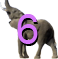
<style>
.page{position:relative;width:58px;height:59px;background:#ffffff}
.page>*{position:absolute;margin:0}
.t1{font:41.7px "ArialMT";color:#d576f8}
</style>
<div class="page">
<p class="t1" style="left:17px;top:14px;width:21px;height:30px">6</p>
</div>
